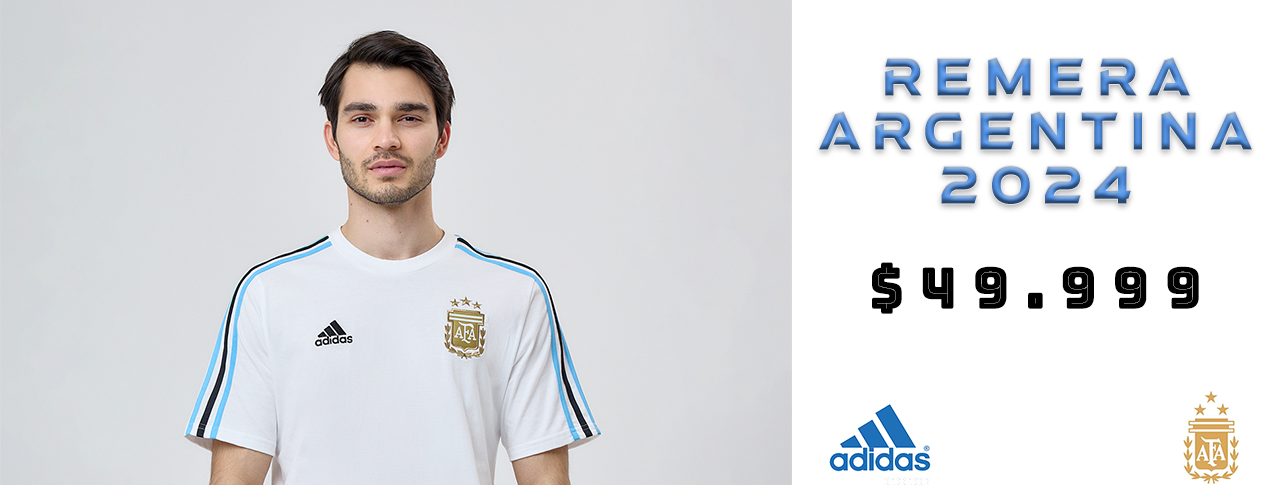
<style>
.page{position:relative;width:1280px;height:485px;background:#ffffff}
.page>*{position:absolute;margin:0}
.t1{font:46.9px/54px "aAtmospheric";letter-spacing:0.3em;scale:0.93 1}
.t2{font:56.8px "BungeeInline-Regular";letter-spacing:0.3em;color:#000000;scale:0.93 1}
</style>
<div class="page">
<p class="t1" style="left:819px;top:58px;width:433px;height:146px;text-align:center">Remera Argentina 2024</p>
<p class="t2" style="left:872px;top:262px;width:327px;height:52px">$49.999</p>
</div>
